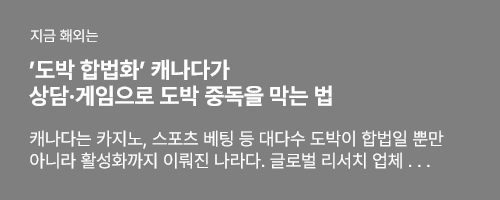
<style>
.page{position:relative;width:500px;height:200px;background:#7f7f7f}
.page>*{position:absolute;margin:0}
.t1{font:15px "Pretendard-Regular";color:#ffffff}
.t2{font:23px/26px "Pretendard-Bold";color:#ffffff}
.t3{font:18px/22px "Pretendard-Regular";color:#ffffff}
</style>
<div class="page">
<p class="t1" style="left:30px;top:29px;width:68px;height:14px">지금 홰외는</p>
<p class="t2" style="left:29px;top:59px;width:303px;height:48px">’도박 합법화’ 캐나다가<br>상담·게임으로 도박 중독을 막는 법</p>
<p class="t3" style="left:30px;top:130px;width:414px;height:39px">캐나다는 카지노, 스포츠 베팅 등 대다수 도박이 합법일 뿐만<br>아니라 활성화까지 이뤄진 나라다. 글로벌 리서치 업체 . . .</p>
</div>
